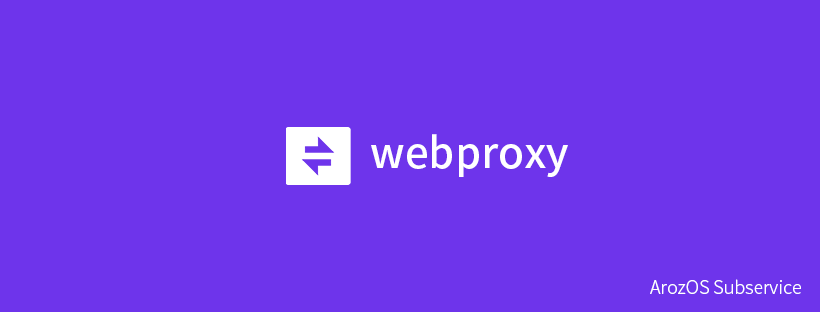
<style>
.page{position:relative;width:820px;height:312px;background:#6e34eb}
.page>*{position:absolute;margin:0}
.t1{font:42px "NotoSansCJKtc-Medium";color:#ffffff}
.t2{font:18px "NotoSansCJKtc-Light";color:#ffffff}
</style>
<div class="page">
<p class="t1" style="left:371px;top:134px;width:197px;height:43px">webproxy</p>
<p class="t2" style="left:650px;top:279px;width:151px;height:15px">ArozOS Subservice</p>
</div>
